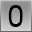
<style>
.page{position:relative;width:32px;height:32px}
.page>*{position:absolute;margin:0}
.t1{font:30px "ArialMT";color:#000000}
</style>
<div class="page">
<p class="t1" style="left:8px;top:5px;width:15px;height:22px">0</p>
</div>
